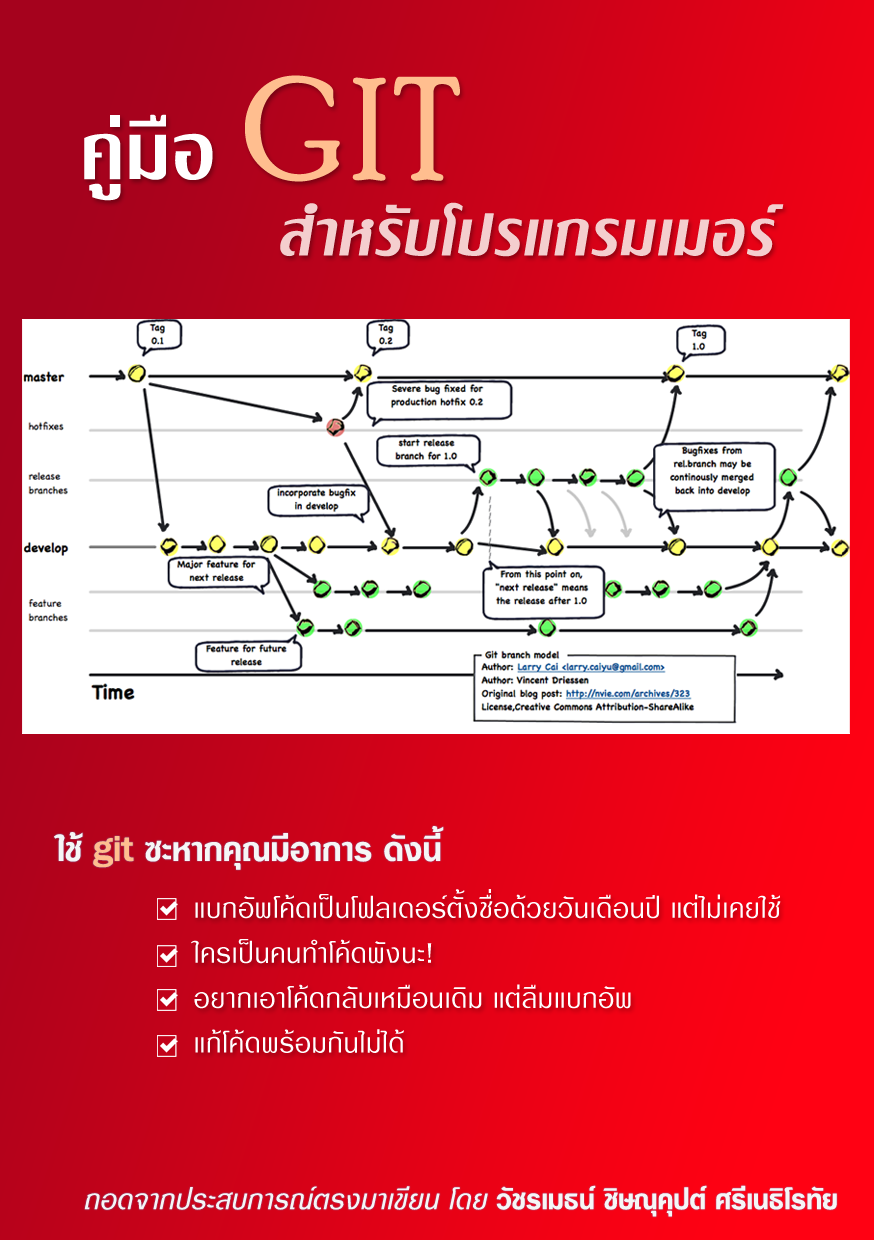
<style>
.page{position:relative;width:874px;height:1240px;background:#ffffff}
.page>*{position:absolute;margin:0}
.t1{font:110.8px "DBSilomX";color:#ffffff}
.t2{font:145.1px "PoorRichard-Regular";color:#ffbe8f}
.t3{font:89.3px "DBSilomX-Italic";color:#f4cece}
.t4{font:44.7px "DBSathornX-Medium";color:#f6f6f6}
.t5{font:44.7px "DBSathornX-Medium";color:#ffbe8f}
.t6{font:37px/44.9px "DBSathornX";color:#ffffff}
.t7{font:37px "DBSathornX-Medium";color:#f6f6f6}
.t8{font:37px "DBSathornX-Italic";color:#f6f6f6}
</style>
<div class="page">
<p class="t1" style="left:84px;top:75px;width:376px;height:126px">คู่มือ <span class="t2">GIT</span></p>
<p class="t3" style="left:280px;top:202px;width:504px;height:55px">สำหรับโปรแกรมเมอร์</p>
<p class="t4" style="left:54px;top:826px;width:390px;height:44px">ใช้ <span class="t5">git</span> ซะหากคุณมีอาการ ดังนี้</p>
<p class="t6" style="left:191px;top:889px;width:590px;height:164px">แบกอัพโค้ดเป็นโฟลเดอร์ตั้งชื่อด้วยวันเดือนปี แต่ไม่เคยใช้<br>ใครเป็นคนทำโค้ดพังนะ!<br>อยากเอาโค้ดกลับเหมือนเดิม แต่ลืมแบกอัพ<br>แก้โค้ดพร้อมกันไม่ได้</p>
<p class="t7" style="left:84px;top:1185px;width:753px;height:32px"><span class="t8">ถอดจากประสบการณ์ตรงมาเขียน โดย </span>วัชรเมธน์ ชิษณุคุปต์ ศรีเนธิโรทัย</p>
</div>
